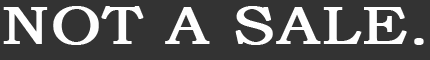
<style>
.page{position:relative;width:430px;height:60px;background:#333333}
.page>*{position:absolute;margin:0}
.t1{font:52.7px "BookmanOldStyle";color:#fefefe;text-transform:uppercase;font-weight:bold;scale:1.21 1}
</style>
<div class="page">
<p class="t1" style="left:3px;top:6px;width:421px;height:39px">not a sale.</p>
</div>
